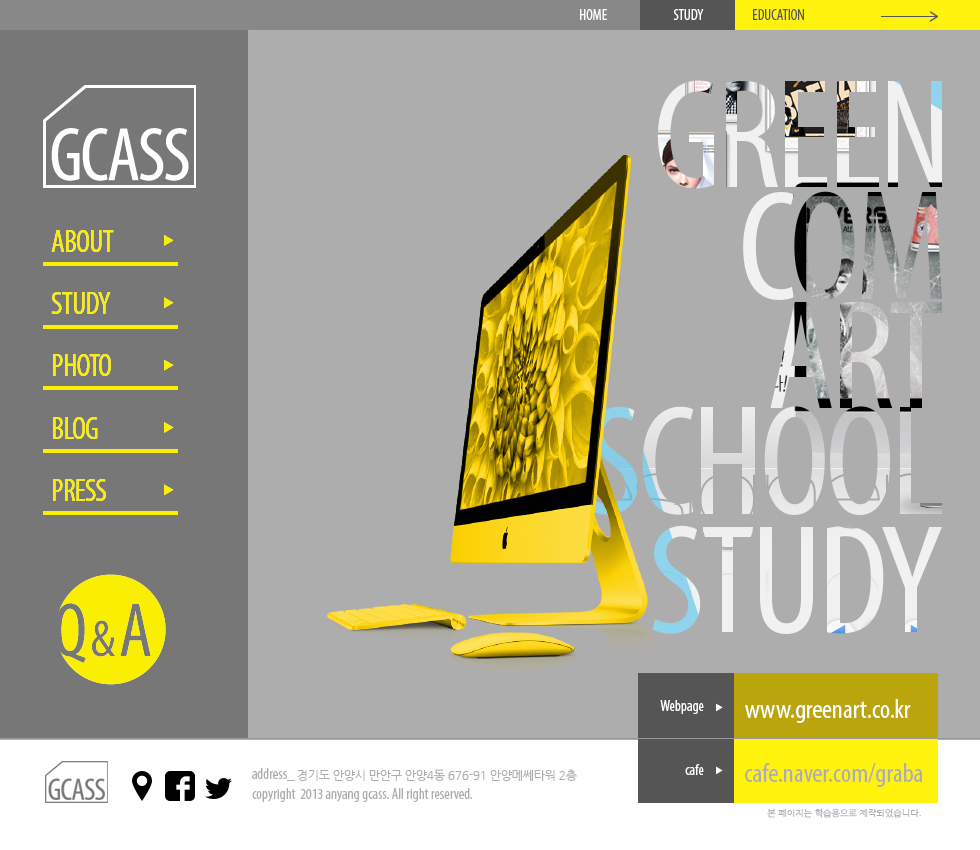
<style>
.page{position:relative;width:980px;height:850px;background:#adadad}
.page>*{position:absolute;margin:0}
.t1{font:15px "MyriadPro-Cond";color:#ffffff}
.t2{font:15px "MyriadPro-Cond";color:#555555}
.t3{font:31.5px "MyriadPro-Cond";letter-spacing:-0.03em;color:#faef00}
.t4{font:27px "MyriadPro-Cond";color:#ffffff}
.t5{font:12px "NanumGothic";letter-spacing:-0.025em;color:#adadad}
.t6{font:15px "MyriadPro-Cond";color:#adadad}
.t7{font:27px "MyriadPro-Cond";color:#adadad}
.t8{font:9px "NanumGothic";color:#adadad}
</style>
<div class="page">
<p class="t1" style="left:580px;top:9px;width:27px;height:11px">HOME</p>
<p class="t1" style="left:673px;top:9px;width:31px;height:11px">STUDY</p>
<p class="t2" style="left:753px;top:9px;width:51px;height:11px">EDUCATION</p>
<p class="t3" style="left:51px;top:230px;width:63px;height:22px">ABOUT</p>
<p class="t3" style="left:51px;top:292px;width:60px;height:22px">STUDY</p>
<p class="t3" style="left:53px;top:354px;width:58px;height:22px">PHOTO</p>
<p class="t3" style="left:53px;top:417px;width:45px;height:22px">BLOG</p>
<p class="t3" style="left:53px;top:479px;width:53px;height:22px">PRESS</p>
<p class="t1" style="left:660px;top:700px;width:44px;height:14px">Webpage</p>
<p class="t4" style="left:745px;top:699px;width:166px;height:24px">www.greenart.co.kr</p>
<p class="t5" style="left:252px;top:768px;width:325px;height:13px"><span class="t6">address_ </span>경기도 안양시 만안구 안양4동 676-91 안양메쎄타워 2층</p>
<p class="t1" style="left:685px;top:764px;width:19px;height:11px">cafe</p>
<p class="t7" style="left:745px;top:763px;width:177px;height:24px">cafe.naver.com/graba</p>
<p class="t6" style="left:252px;top:788px;width:220px;height:14px">copyright  2013 anyang gcass. All right reserved.</p>
<p class="t8" style="left:767px;top:808px;width:154px;height:10px">본 페이지는 학습용으로 제작되었습니다.</p>
</div>
